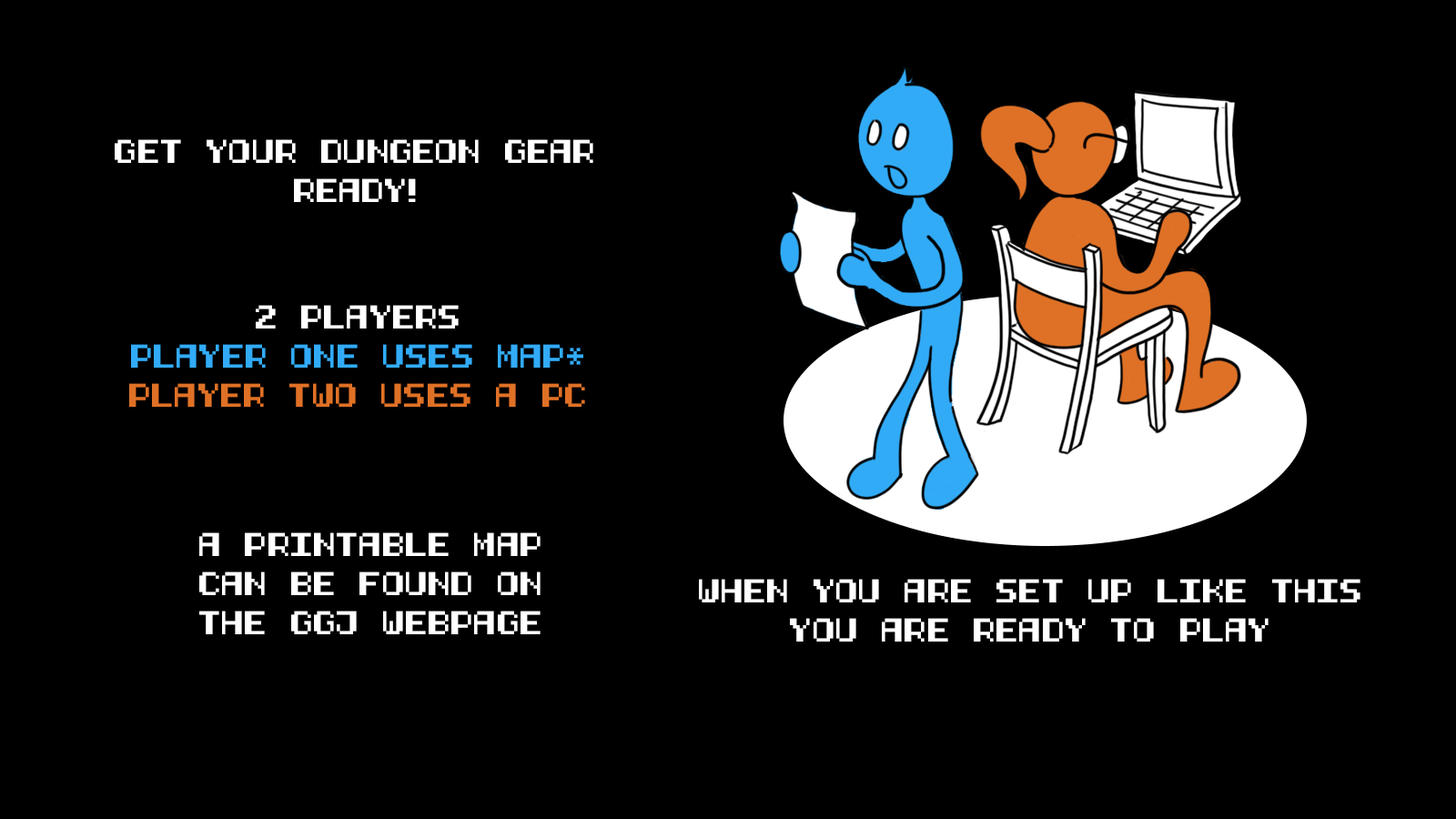
<style>
.page{position:relative;width:1456px;height:819px;background:#000000}
.page>*{position:absolute;margin:0}
.t1{font:32.8px "HalfBoldPixel-7";color:#ffffff}
.t2{font:32.8px "HalfBoldPixel-7";color:#32abf7}
.t3{font:32.8px "HalfBoldPixel-7";color:#df7126}
</style>
<div class="page">
<p class="t1" style="left:115px;top:139px;width:478px;height:63px;text-align:center">GET YOUR DUNGEON GEAR<br>READY!</p>
<p class="t2" style="left:129px;top:305px;width:456px;height:102px;text-align:center"><span class="t1">2 PLAYERS<br></span>PLAYER ONE USES MAP*<br><span class="t3">PLAYER TWO USES A PC</span></p>
<p class="t1" style="left:199px;top:532px;width:342px;height:102px;text-align:center">A PRINTABLE MAP<br>CAN BE FOUND ON<br>THE GGJ WEBPAGE</p>
<p class="t1" style="left:699px;top:579px;width:661px;height:63px;text-align:center">WHEN YOU ARE SET UP LIKE THIS<br>YOU ARE READY TO PLAY</p>
</div>
